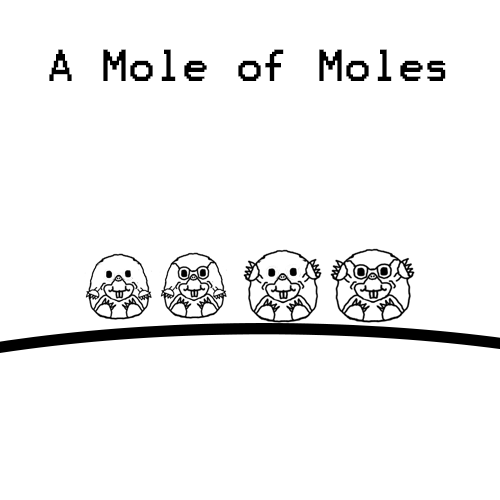
<style>
.page{position:relative;width:500px;height:500px;background:#ffffff}
.page>*{position:absolute;margin:0}
.t1{font:36px "Terminal";color:#000000}
</style>
<div class="page">
<p class="t1" style="left:49px;top:49px;width:397px;height:32px">A Mole of Moles</p>
</div>
